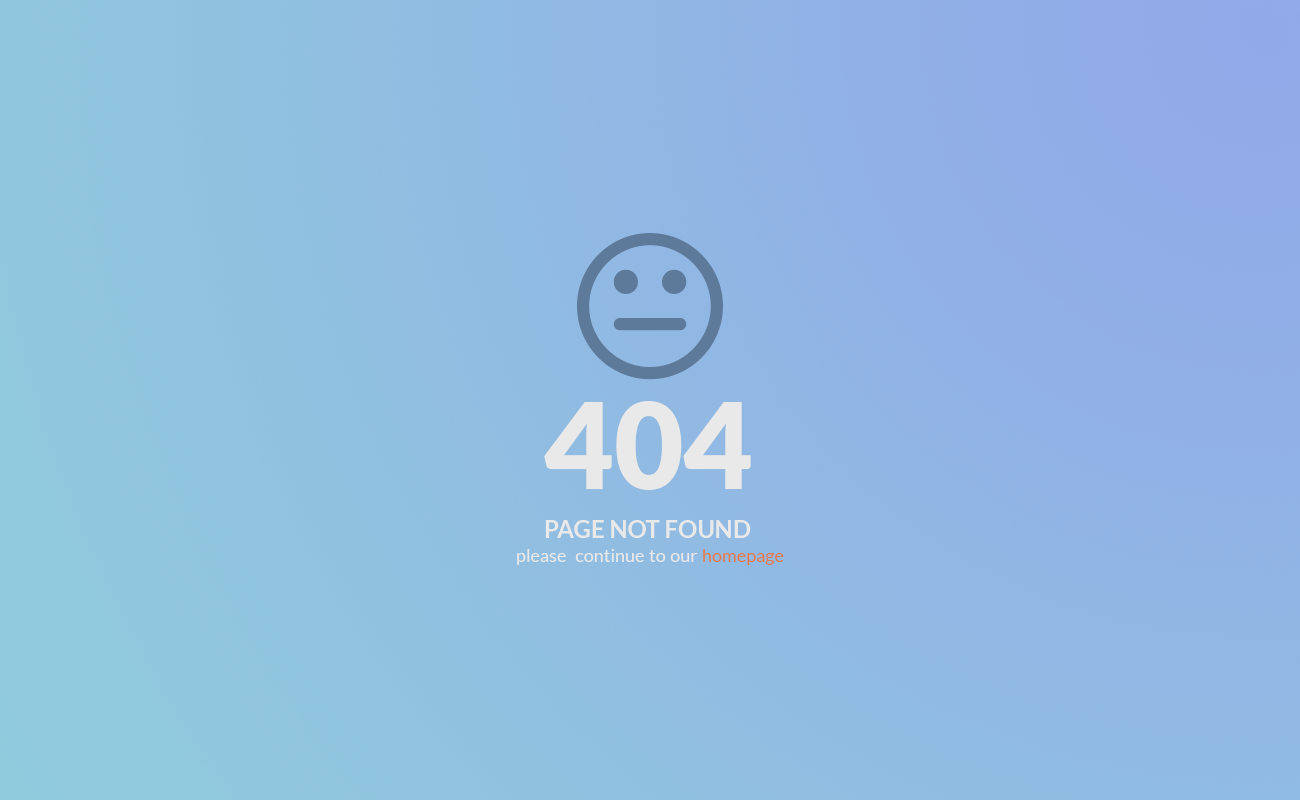
<style>
.page{position:relative;width:1300px;height:800px}
.page>*{position:absolute;margin:0}
.t1{font:120px "Lato-Black";color:#e9e9e9}
.t2{font:24px "Lato-Bold";color:#e9e9e9}
.t3{font:18px "Lato-Regular";color:#e9e9e9}
.t4{font:18px "Lato-Regular";color:#e37b4b}
</style>
<div class="page">
<p class="t1" style="left:544px;top:401px;width:207px;height:89px">404</p>
<p class="t2" style="left:545px;top:520px;width:206px;height:18px">PAGE NOT FOUND</p>
<p class="t3" style="left:517px;top:549px;width:267px;height:16px">please  continue to our <span class="t4">homepage</span></p>
</div>
